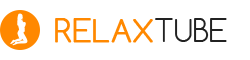
<style>
.page{position:relative;width:250px;height:60px;background:#ffffff}
.page>*{position:absolute;margin:0}
.t1{font:30px "Comfortaa-Light";color:#ff8800;text-transform:uppercase;font-weight:bold}
.t2{font:30px "Comfortaa-Light";color:#222222;text-transform:uppercase}
</style>
<div class="page">
<p class="t1" style="left:55px;top:18px;width:172px;height:25px">Relax<span class="t2">tube</span></p>
</div>
